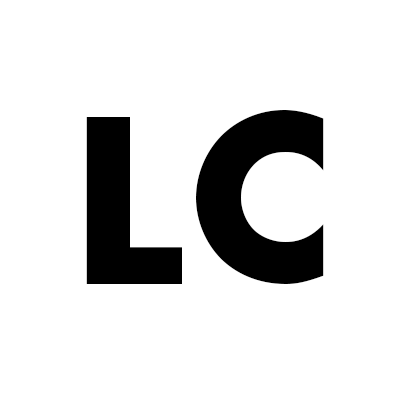
<style>
.page{position:relative;width:400px;height:400px;background:#ffffff}
.page>*{position:absolute;margin:0}
.t1{font:250px "FuturaPT-Bold";color:#000000}
</style>
<div class="page">
<p class="t1" style="left:196px;top:110px;width:128px;height:174px">C</p>
<p class="t1" style="left:86px;top:117px;width:96px;height:167px">L</p>
</div>
